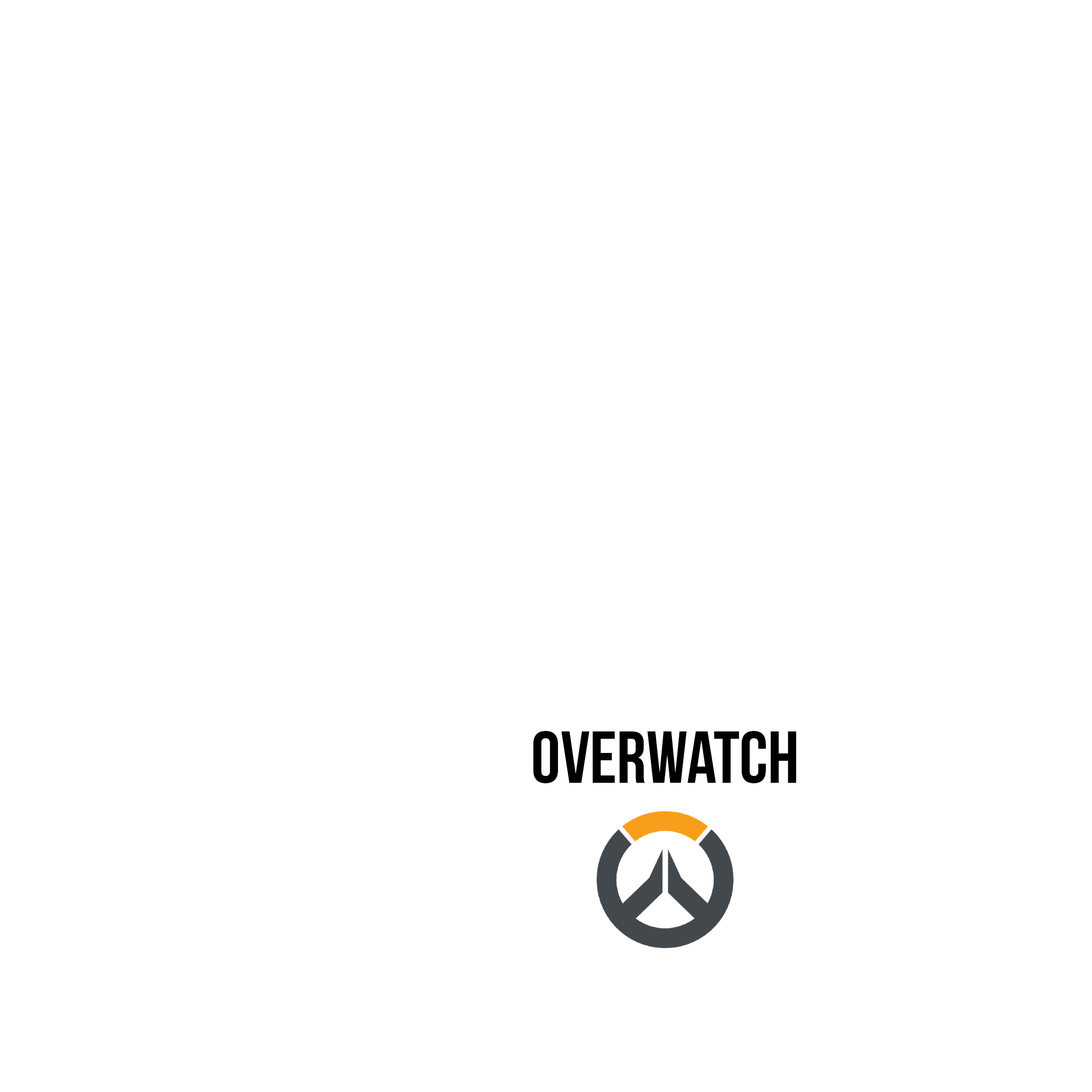
<style>
.page{position:relative;width:1092px;height:1092px;background:#ffffff}
.page>*{position:absolute;margin:0}
.t1{font:73.4px "BebasNeue";color:#000000}
</style>
<div class="page">
<p class="t1" style="left:533px;top:731px;width:263px;height:52px">overwatch</p>
</div>
